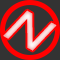
<style>
.page{position:relative;width:60px;height:60px;background:#333333}
.page>*{position:absolute;margin:0}
.t1{font:46.8px "ArialMT";color:#f8d6d6;scale:1.12 1}
</style>
<div class="page">
<p class="t1" style="left:3px;top:10px;width:54px;height:41px;rotate:52deg">N</p>
</div>
